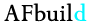
<style>
.page{position:relative;width:90px;height:25px;background:#ffffff}
.page>*{position:absolute;margin:0}
.t1{font:27px "Perpetua";color:#000000;font-weight:bold}
.t2{font:27px "Perpetua";color:#00f6ff;font-weight:bold}
</style>
<div class="page">
<p class="t1" style="left:4px;top:3px;width:83px;height:19px">AFbuil<span class="t2">d</span></p>
</div>
